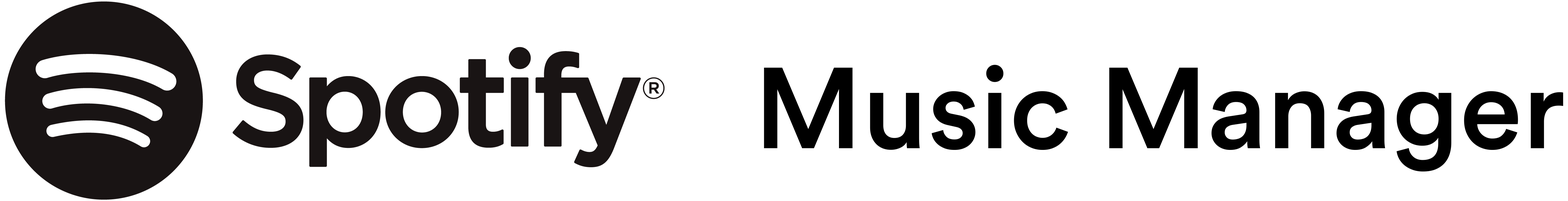
<style>
.page{position:relative;width:1568px;height:201px;background:#ffffff}
.page>*{position:absolute;margin:0}
.t1{font:113.4px "CircularSpotifyTxT-Med";color:#000000}
</style>
<div class="page">
<p class="t1" style="left:764px;top:65px;width:799px;height:106px">Music Manager</p>
</div>
